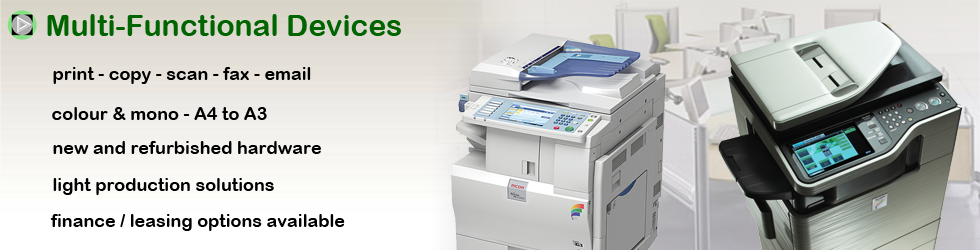
<style>
.page{position:relative;width:980px;height:250px}
.page>*{position:absolute;margin:0}
.t1{font:30px "ArialRoundedMTBold";color:#006400}
.t2{font:18px "ArialRoundedMTBold";color:#000000}
</style>
<div class="page">
<p class="t1" style="left:47px;top:14px;width:354px;height:22px">Multi-Functional Devices</p>
<p class="t2" style="left:53px;top:67px;width:258px;height:17px">print - copy - scan - fax - email</p>
<p class="t2" style="left:52px;top:107px;width:215px;height:13px">colour &amp; mono - A4 to A3</p>
<p class="t2" style="left:53px;top:141px;width:268px;height:13px">new and refurbished hardware</p>
<p class="t2" style="left:53px;top:178px;width:221px;height:17px">light production solutions</p>
<p class="t2" style="left:50px;top:214px;width:295px;height:17px">finance / leasing options available</p>
</div>
